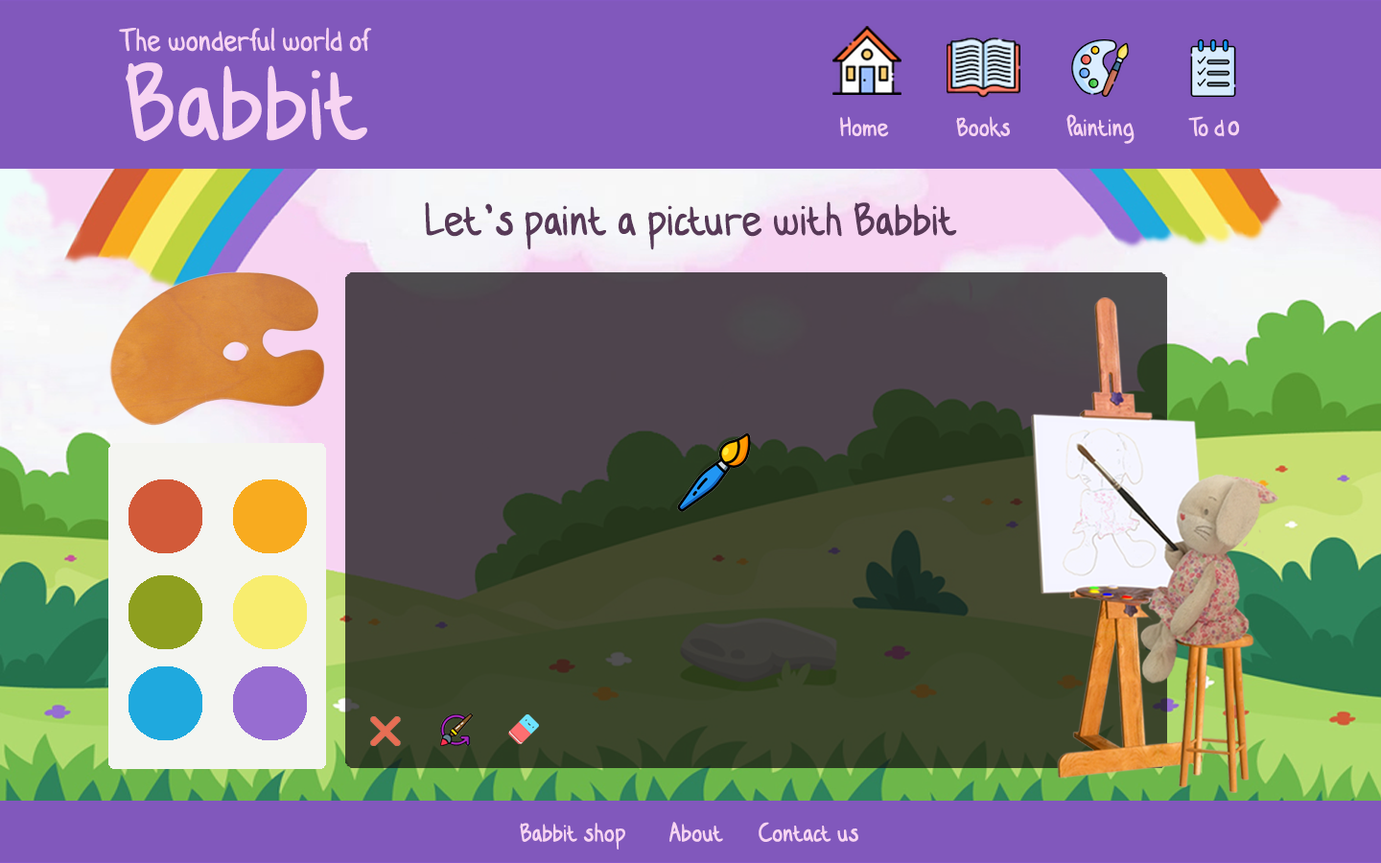
<style>
.page{position:relative;width:1381px;height:863px;background:#8158bc}
.page>*{position:absolute;margin:0}
.t1{font:46px "MyKidsHandwrittenBasic";color:#f7d4f2}
.t2{font:163.1px "MyKidsHandwrittenBasic";color:#f7d4f2}
.t3{font:38.4px "MyKidsHandwrittenBasic";color:#f7d4f2}
.t4{font:45.1px "MyKidsHandwrittenBasic";color:#f7d4f2}
.t5{font:69.1px "MyKidsHandwrittenBasic";color:#573957}
</style>
<div class="page">
<p class="t1" style="left:119px;top:27px;width:253px;height:25px">The wonderful world of</p>
<p class="t2" style="left:126px;top:62px;width:241px;height:80px">Babbit</p>
<p class="t3" style="left:840px;top:114px;width:399px;height:30px">Home       Books   Painting   To d<span class="t4">o</span></p>
<p class="t5" style="left:425px;top:201px;width:532px;height:49px">Let’s paint a picture with Babbit</p>
<p class="t3" style="left:520px;top:822px;width:338px;height:28px">Babbit shop     About            Contact us</p>
</div>
